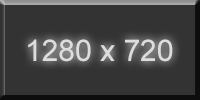
<style>
.page{position:relative;width:200px;height:100px;background:#333333}
.page>*{position:absolute;margin:0}
.t1{font:30px "ArialMT";color:#dddddd}
</style>
<div class="page">
<p class="t1" style="left:28px;top:39px;width:145px;height:23px">1280 x 720</p>
</div>
